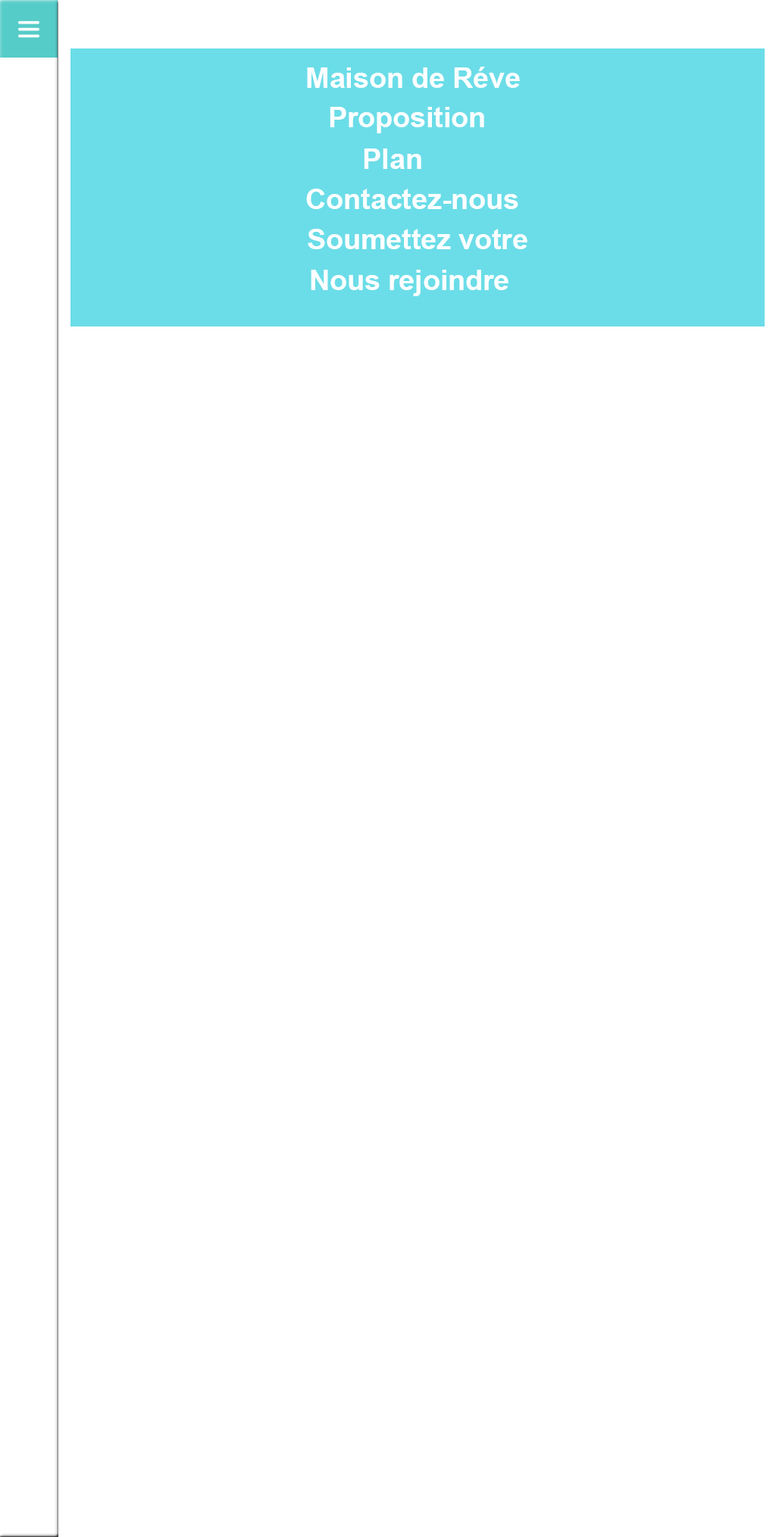
<style>
.page{position:relative;width:776px;height:1537px;background:#ffffff}
.page>*{position:absolute;margin:0}
.t1{font:28.4px "Arial-BoldMT";color:#fcffff}
</style>
<div class="page">
<p class="t1" style="left:307px;top:67px;width:213px;height:21px">Maison de Réve</p>
<p class="t1" style="left:330px;top:107px;width:154px;height:26px">Proposition</p>
<p class="t1" style="left:364px;top:148px;width:57px;height:21px">Plan</p>
<p class="t1" style="left:306px;top:189px;width:212px;height:20px">Contactez-nous</p>
<p class="t1" style="left:308px;top:229px;width:219px;height:20px">Soumettez votre</p>
<p class="t1" style="left:311px;top:270px;width:197px;height:26px">Nous rejoindre</p>
</div>
